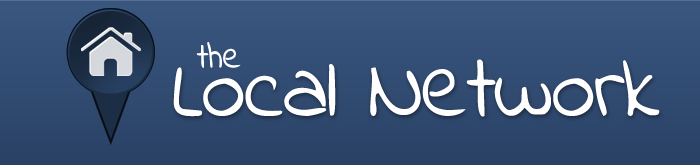
<style>
.page{position:relative;width:700px;height:165px}
.page>*{position:absolute;margin:0}
.t1{font:36.2px "IndieFlower";letter-spacing:-0.02em;color:#ffffff}
.t2{font:90.4px "IndieFlower";letter-spacing:-0.02em;color:#ffffff}
</style>
<div class="page">
<p class="t1" style="left:196px;top:42px;width:45px;height:26px">the</p>
<p class="t2" style="left:173px;top:59px;width:487px;height:58px">Local Network</p>
</div>
